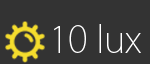
<style>
.page{position:relative;width:150px;height:64px;background:#333333}
.page>*{position:absolute;margin:0}
.t1{font:36px "KozGoPr6N-ExtraLight";color:#ffffff}
</style>
<div class="page">
<p class="t1" style="left:54px;top:24px;width:87px;height:29px">10 lux</p>
</div>
